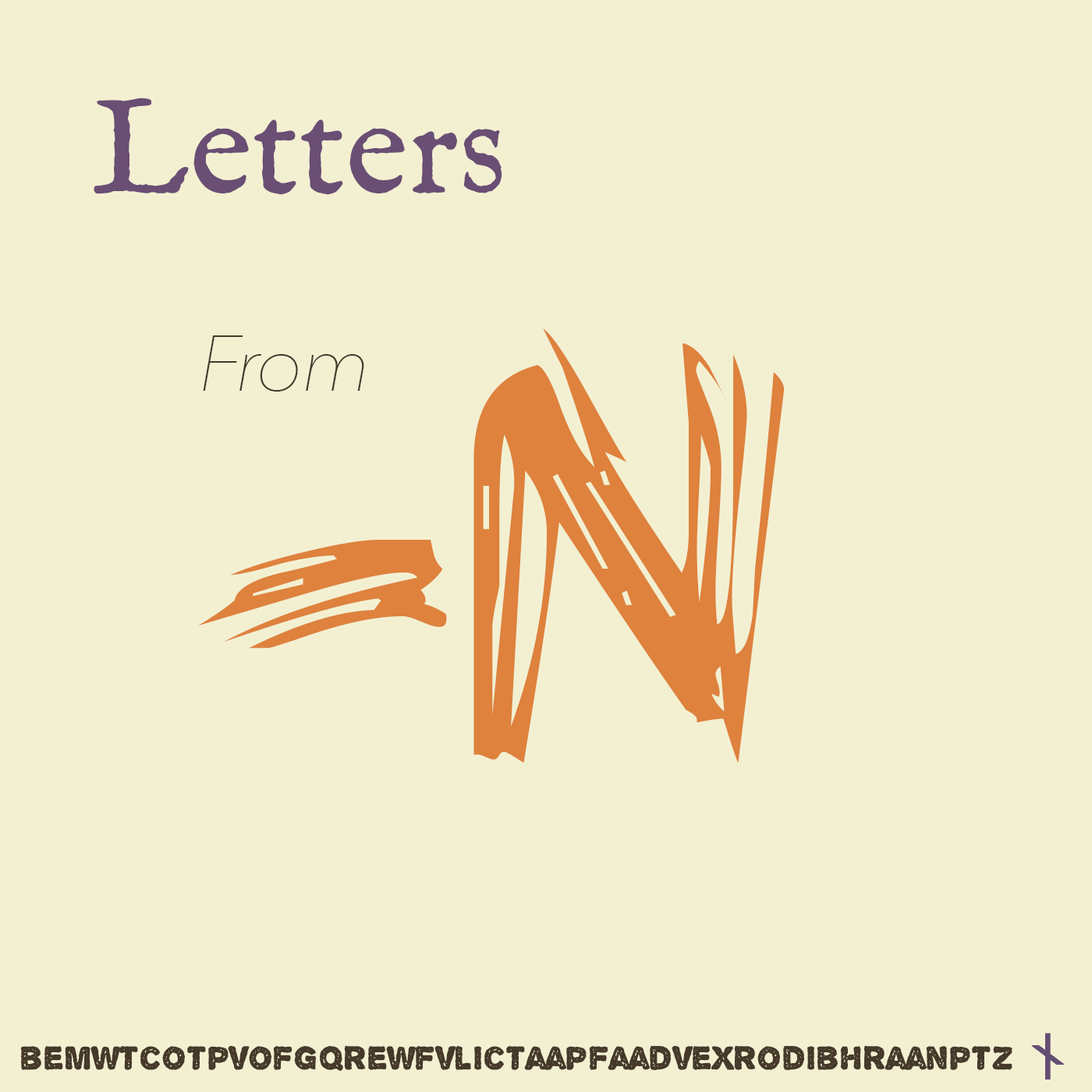
<style>
.page{position:relative;width:1092px;height:1092px;background:#f3f0d2}
.page>*{position:absolute;margin:0}
.t1{font:136.5px "IM_FELL_English_PRO_Roman";color:#6a4e74}
.t2{font:845px "Bearpaw";color:#de823d}
.t3{font:78px "AvenirNext-UltraLightItalic";letter-spacing:-0.025em;color:#45392a}
.t4{font:58.5px "Geneva";color:#644e74;font-weight:bold}
.t5{font:35.7px "AlphaEcho";color:#45392a}
</style>
<div class="page">
<p class="t1" style="left:94px;top:97px;width:408px;height:98px">Letters</p>
<p class="t2" style="left:198px;top:328px;width:587px;height:435px">-N</p>
<p class="t3" style="left:203px;top:335px;width:161px;height:57px">From</p>
<p class="t4" style="left:1031px;top:1033px;width:33px;height:47px">ᚾ</p>
<p class="t5" style="left:20px;top:1045px;width:992px;height:26px">bemwtcotpvofgqrewfvlictaapfaadvexrodibhraanptz</p>
</div>
